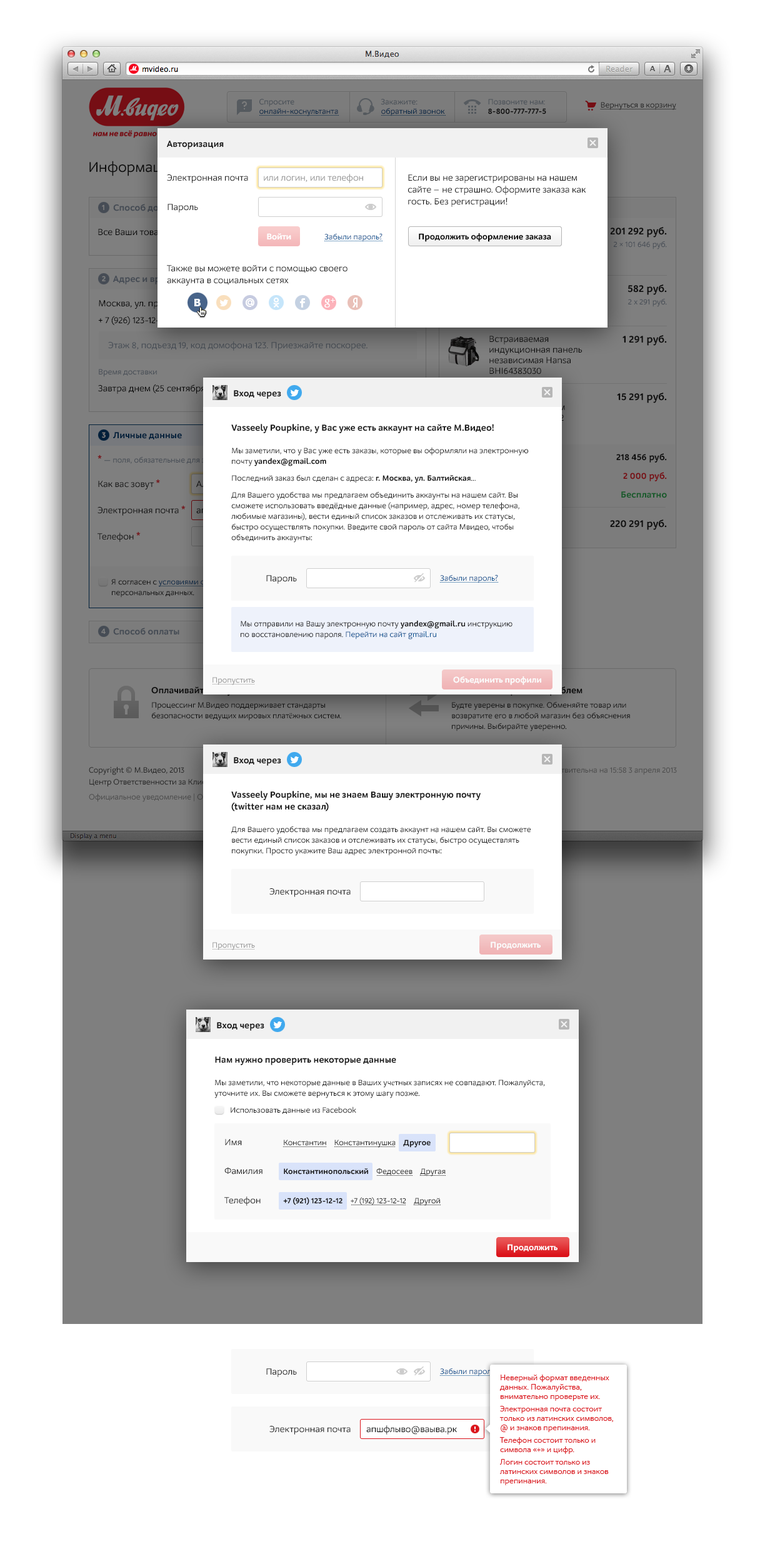
<style>
.page{position:relative;width:765px;height:1559px;background:#ffffff}
.page>*{position:absolute;margin:0}
.t1{font:9.4px "M.Video-Bold";color:#1b1b1b}
.t2{font:9.4px "M.Video-Regular";color:#969696}
.t3{font:9.4px "M.Video-Regular";color:#1b1b1b}
.t4{font:9.4px/11.9px "M.Video-Regular";color:#1b1b1b}
.t5{font:8.7px "M.Video-Bold";color:#ffffff}
.t6{font:8.1px "M.Video-Regular";color:#004b8c}
.t7{font:8.7px "M.Video-Bold";color:#000000}
.t8{font:8.1px/10.6px "M.Video-Regular";color:#1b1b1b}
.t9{font:8.1px/10.6px "M.Video-Bold";color:#1b1b1b}
.t10{font:8.1px/10.6px "M.Video-Regular";color:#004b8c}
.t11{font:8.1px "M.Video-Regular";color:#969696}
.t12{font:9.4px/11.9px "M.Video-Bold";color:#1b1b1b}
.t13{font:8.1px/10.6px "MinionPro-Regular";color:#1b1b1b}
.t14{font:8.1px "M.Video-Regular";color:#1b1b1b}
.t15{font:8.1px "M.Video-Bold";color:#1b1b1b}
.t16{font:8.1px "M.Video-Regular"}
.t17{font:8.1px/9.4px "M.Video-Regular";color:#db151c}
.t18{font:9.4px "M.Video-Regular";color:#000000}
</style>
<div class="page">
<p class="t1" style="left:167px;top:141px;width:57px;height:8px">Авторизация</p>
<p class="t2" style="left:264px;top:174px;width:99px;height:9px">или логин, или телефон</p>
<p class="t3" style="left:167px;top:174px;width:81px;height:9px">Электронная почта</p>
<p class="t4" style="left:408px;top:174px;width:178px;height:33px">Если вы не зарегистрированы на нашем<br>сайте – не страшно. Оформите заказа как<br>гость. Без регистрации!</p>
<p class="t3" style="left:167px;top:204px;width:31px;height:8px">Пароль</p>
<p class="t5" style="left:267px;top:233px;width:24px;height:7px">Войти</p>
<p class="t6" style="left:324px;top:233px;width:58px;height:9px">Забыли пароль?</p>
<p class="t7" style="left:419px;top:233px;width:132px;height:9px">Продолжить оформление заказа</p>
<p class="t4" style="left:167px;top:265px;width:180px;height:21px">Также вы можете войти с помощью своего аккаунта в социальных сетях</p>
<p class="t1" style="left:234px;top:390px;width:47px;height:9px">Вход через</p>
<p class="t1" style="left:231px;top:424px;width:263px;height:9px">Vasseely Poupkine, у Вас уже есть аккаунт на сайте М.Видео!</p>
<p class="t8" style="left:231px;top:447px;width:298px;height:95px">Мы заметили, что у Вас уже есть заказы, которые вы оформляли на электронную почту <span class="t9">yandex@gmail.com<br></span>Последний заказ был сделан с адреса: <span class="t9">г. Москва, ул. Балтийская</span>...<br>Для Вашего удобства мы предлагаем объединить аккаунты на нашем сайт. Вы сможете использовать введёдные данные (например, адрес, номер телефона, любимые магазины), вести единый список заказов и отслеживать их статусы, быстро осуществлять покупки. Введите свой пароль от сайта Мвидео, чтобы объединить аккаунты:</p>
<p class="t3" style="left:266px;top:575px;width:31px;height:9px">Пароль</p>
<p class="t6" style="left:440px;top:574px;width:58px;height:9px">Забыли пароль?</p>
<p class="t8" style="left:241px;top:620px;width:271px;height:19px">Мы отправили на Вашу электронную почту <span class="t9">yandex@gmail.ru</span> инструкцию по восстановлению пароля. <span class="t10">Перейти на сайт gmail.ru</span></p>
<p class="t11" style="left:212px;top:677px;width:43px;height:8px">Пропустить</p>
<p class="t5" style="left:453px;top:676px;width:88px;height:9px">Объединить профили</p>
<p class="t1" style="left:234px;top:757px;width:47px;height:9px">Вход через</p>
<p class="t12" style="left:231px;top:791px;width:250px;height:20px">Vasseely Poupkine, мы не знаем Вашу электронную почту<br>(twitter нам не сказал)</p>
<p class="t8" style="left:231px;top:826px;width:300px;height:30px">Для Вашего удобства мы предлагаем создать аккаунт на нашем сайт. Вы сможете вести единый список заказов и отслеживать их статусы, быстро осуществлять покупки. Просто укажите Ваш адрес электронной почты:</p>
<p class="t3" style="left:269px;top:888px;width:82px;height:9px">Электронная почта</p>
<p class="t11" style="left:212px;top:942px;width:43px;height:8px">Пропустить</p>
<p class="t5" style="left:491px;top:941px;width:50px;height:9px">Продолжить</p>
<p class="t1" style="left:217px;top:1022px;width:47px;height:9px">Вход через</p>
<p class="t1" style="left:215px;top:1056px;width:181px;height:9px">Нам нужно проверить некоторые данные</p>
<p class="t8" style="left:214px;top:1079px;width:331px;height:19px">Мы заметили, что некоторые данные в Ваших уч<span class="t13">е</span>тных записях не совпадают. Пожалуйста, уточните их. Вы сможете вернуться к этому шагу позже.</p>
<p class="t14" style="left:231px;top:1106px;width:125px;height:8px">Использовать данные из Facebook</p>
<p class="t3" style="left:225px;top:1139px;width:17px;height:6px">Имя</p>
<p class="t14" style="left:284px;top:1139px;width:147px;height:8px">Константин    Константинушка    <span class="t15">Другое</span></p>
<p class="t3" style="left:224px;top:1167px;width:38px;height:7px">Фамилия</p>
<p class="t15" style="left:284px;top:1167px;width:162px;height:9px">Константинопольский<span class="t14">    Федосеев    Другая</span></p>
<p class="t3" style="left:224px;top:1196px;width:37px;height:10px">Телефон</p>
<p class="t14" style="left:283px;top:1197px;width:157px;height:9px"><span class="t15">+7 (921) 123-12-12</span>    +7 (192) 123-12-12    Другой</p>
<p class="t5" style="left:507px;top:1244px;width:50px;height:8px">Продолжить</p>
<p class="t3" style="left:266px;top:1368px;width:31px;height:9px">Пароль</p>
<p class="t16" style="left:440px;top:1367px;width:58px;height:9px">Забыли пароль?</p>
<p class="t17" style="left:499px;top:1374px;width:114px;height:111px">Неверный формат введенных<br>данных. Пожалуйства,<br>внимательно проверьте их.<br>Электронная почта состоит<br>только из латинских символов,<br>@ и знаков препинания.<br>Телефон состоит только и<br>символа «+» и цифр.<br>Логин состоит только из<br>латинских символов и знаков<br>препинания.</p>
<p class="t3" style="left:269px;top:1426px;width:82px;height:8px">Электронная почта</p>
<p class="t18" style="left:366px;top:1425px;width:91px;height:9px">апшфлыво@ваыва.рк</p>
</div>
